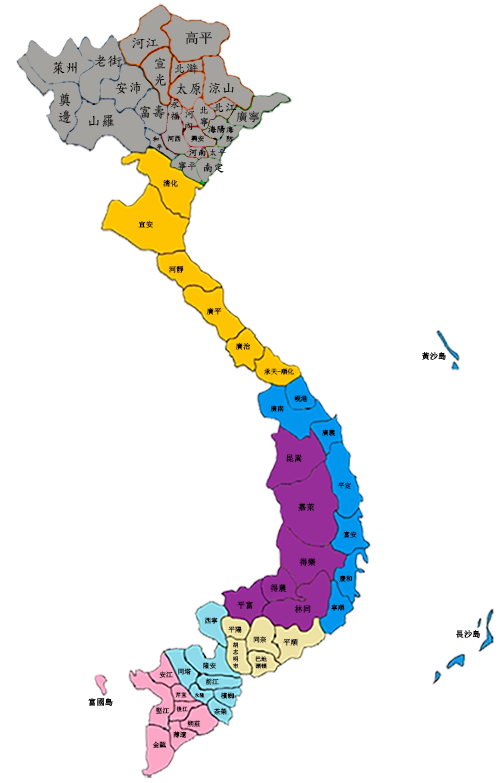
<style>
.page{position:relative;width:500px;height:783px;background:#ffffff}
.page>*{position:absolute;margin:0}
.t1{font:14px "DFKaiShu-SB-Estd-BF";color:#151515}
.t2{font:14px "SimSun";color:#151515}
.t3{font:14px "TimesNewRomanPSMT";color:#151515}
.t4{font:14px "DFKaiShu-SB-Estd-BF";color:#030303}
.t5{font:12px "DFKaiShu-SB-Estd-BF";color:#151515}
.t6{font:10px "DFKaiShu-SB-Estd-BF";color:#000000}
.t7{font:14px "DFKaiShu-SB-Estd-BF"}
.t8{font:10px "DFKaiShu-SB-Estd-BF"}
.t9{font:12px "DFKaiShu-SB-Estd-BF";color:#000000}
.t10{font:12px "SimSun"}
.t11{font:12px "TimesNewRomanPSMT"}
.t12{font:9px "DFKaiShu-SB-Estd-BF";color:#000000}
.t13{font:8px "DFKaiShu-SB-Estd-BF";color:#030303}
.t14{font:6.7px "DFKaiShu-SB-Estd-BF"}
.t15{font:6.7px "SimSun"}
.t16{font:6.7px "SimSun";color:#000000}
.t17{font:9px "DFKaiShu-SB-Estd-BF";color:#030303}
.t18{font:11px "DFKaiShu-SB-Estd-BF"}
.t19{font:7.5px "SimSun";color:#010101}
.t20{font:7.5px "SimSun";color:#000000}
.t21{font:8.3px "SimSun";color:#000000}
.t22{font:6.7px "SimSun";color:#020202}
.t23{font:8.3px "SimSun";color:#050505}
.t24{font:8.3px "SimSun";color:#040404}
.t25{font:6.7px "TimesNewRomanPSMT";color:#020202}
.t26{font:6.7px "SimSun";color:#040404}
.t27{font:7.5px "SimSun";color:#040404}
.t28{font:5.8px "SimSun"}
.t29{font:5.8px "SimSun";color:#040404}
.t30{font:6.7px "TimesNewRomanPSMT"}
.t31{font:5.8px "SimSun";color:#000000}
.t32{font:5px "SimSun";color:#040404}
.t33{font:5.8px "TimesNewRomanPSMT";color:#000000}
</style>
<div class="page">
<p class="t1" style="left:132px;top:38px;width:27px;height:11px">河江</p>
<p class="t2" style="left:185px;top:31px;width:27px;height:14px"><span class="t3"> </span>高平</p>
<p class="t4" style="left:53px;top:61px;width:24px;height:13px">萊州</p>
<p class="t4" style="left:94px;top:55px;width:28px;height:12px">老街</p>
<p class="t1" style="left:154px;top:57px;width:12px;height:29px">宣<br>光</p>
<p class="t5" style="left:175px;top:63px;width:23px;height:11px">北滸</p>
<p class="t4" style="left:115px;top:82px;width:26px;height:12px">安沛</p>
<p class="t1" style="left:176px;top:83px;width:25px;height:12px">太原</p>
<p class="t1" style="left:209px;top:83px;width:25px;height:11px">涼山</p>
<p class="t4" style="left:58px;top:93px;width:13px;height:31px">奠<br>邊</p>
<p class="t6" style="left:170px;top:100px;width:10px;height:20px">永<br>福</p>
<p class="t7" style="left:140px;top:105px;width:25px;height:14px">富壽</p>
<p class="t6" style="left:184px;top:110px;width:11px;height:20px">河<br>內</p>
<p class="t8" style="left:200px;top:106px;width:9px;height:21px">北<br>寧</p>
<p class="t9" style="left:214px;top:103px;width:23px;height:9px">北江</p>
<p class="t10" style="left:236px;top:111px;width:24px;height:12px"><span class="t11">        </span>廣寧</p>
<p class="t4" style="left:88px;top:114px;width:26px;height:14px">山羅</p>
<p class="t12" style="left:208px;top:125px;width:17px;height:9px">海陽</p>
<p class="t13" style="left:226px;top:126px;width:8px;height:16px">海<br>防</p>
<p class="t14" style="left:152px;top:136px;width:11px;height:15px">和<br> 平</p>
<p class="t15" style="left:167px;top:135px;width:14px;height:7px">河西</p>
<p class="t16" style="left:191px;top:135px;width:13px;height:7px">興安</p>
<p class="t12" style="left:189px;top:148px;width:17px;height:9px">河南</p>
<p class="t17" style="left:209px;top:148px;width:17px;height:9px">太平</p>
<p class="t8" style="left:178px;top:161px;width:18px;height:10px">寧平</p>
<p class="t18" style="left:203px;top:162px;width:21px;height:11px">南定</p>
<p class="t19" style="left:163px;top:179px;width:15px;height:8px">清化</p>
<p class="t20" style="left:138px;top:220px;width:15px;height:8px">宜安</p>
<p class="t20" style="left:168px;top:265px;width:16px;height:8px">河靜</p>
<p class="t20" style="left:206px;top:307px;width:16px;height:8px">廣平</p>
<p class="t20" style="left:235px;top:342px;width:15px;height:8px">廣治</p>
<p class="t21" style="left:422px;top:352px;width:24px;height:8px">黃沙島</p>
<p class="t16" style="left:264px;top:368px;width:30px;height:7px">承天-順化</p>
<p class="t22" style="left:294px;top:395px;width:14px;height:7px">峴港</p>
<p class="t22" style="left:270px;top:405px;width:14px;height:7px">廣南</p>
<p class="t22" style="left:322px;top:429px;width:13px;height:7px">廣義</p>
<p class="t23" style="left:286px;top:454px;width:16px;height:8px">昆嵩</p>
<p class="t15" style="left:338px;top:482px;width:13px;height:7px">平定</p>
<p class="t23" style="left:298px;top:503px;width:17px;height:8px">嘉萊</p>
<p class="t22" style="left:343px;top:531px;width:14px;height:7px">富安</p>
<p class="t21" style="left:299px;top:558px;width:17px;height:8px">得樂</p>
<p class="t22" style="left:339px;top:575px;width:14px;height:7px">慶和</p>
<p class="t24" style="left:270px;top:584px;width:17px;height:8px">得農</p>
<p class="t21" style="left:237px;top:601px;width:16px;height:8px">平富</p>
<p class="t21" style="left:294px;top:605px;width:17px;height:8px">林同</p>
<p class="t22" style="left:331px;top:604px;width:14px;height:7px"><span class="t25">   </span>寧順</p>
<p class="t26" style="left:204px;top:617px;width:14px;height:7px">西寧</p>
<p class="t26" style="left:228px;top:626px;width:14px;height:7px">平陽</p>
<p class="t21" style="left:456px;top:630px;width:25px;height:8px">長沙島</p>
<p class="t15" style="left:253px;top:636px;width:14px;height:7px">同奈</p>
<p class="t27" style="left:283px;top:638px;width:15px;height:8px">平順</p>
<p class="t28" style="left:233px;top:642px;width:6px;height:27px">胡<br>志<br>明<br>市</p>
<p class="t26" style="left:203px;top:662px;width:13px;height:7px">隆安</p>
<p class="t29" style="left:255px;top:656px;width:12px;height:13px">巴地<br>頭頓</p>
<p class="t15" style="left:159px;top:671px;width:14px;height:7px"><span class="t30">  </span>安江</p>
<p class="t26" style="left:178px;top:668px;width:13px;height:7px">同塔</p>
<p class="t26" style="left:205px;top:678px;width:14px;height:7px">前江</p>
<p class="t21" style="left:88px;top:698px;width:25px;height:8px">富國島</p>
<p class="t31" style="left:175px;top:692px;width:12px;height:6px">芹苴</p>
<p class="t32" style="left:194px;top:692px;width:11px;height:6px">永隆</p>
<p class="t26" style="left:220px;top:692px;width:14px;height:7px">檳蜘</p>
<p class="t16" style="left:156px;top:707px;width:14px;height:7px">堅江</p>
<p class="t31" style="left:176px;top:706px;width:12px;height:6px"><span class="t33">   </span>後江</p>
<p class="t26" style="left:213px;top:708px;width:14px;height:7px">茶榮</p>
<p class="t16" style="left:187px;top:720px;width:14px;height:7px">朔莊</p>
<p class="t16" style="left:173px;top:731px;width:14px;height:7px">薄遼</p>
<p class="t16" style="left:152px;top:741px;width:15px;height:7px">金甌</p>
</div>
